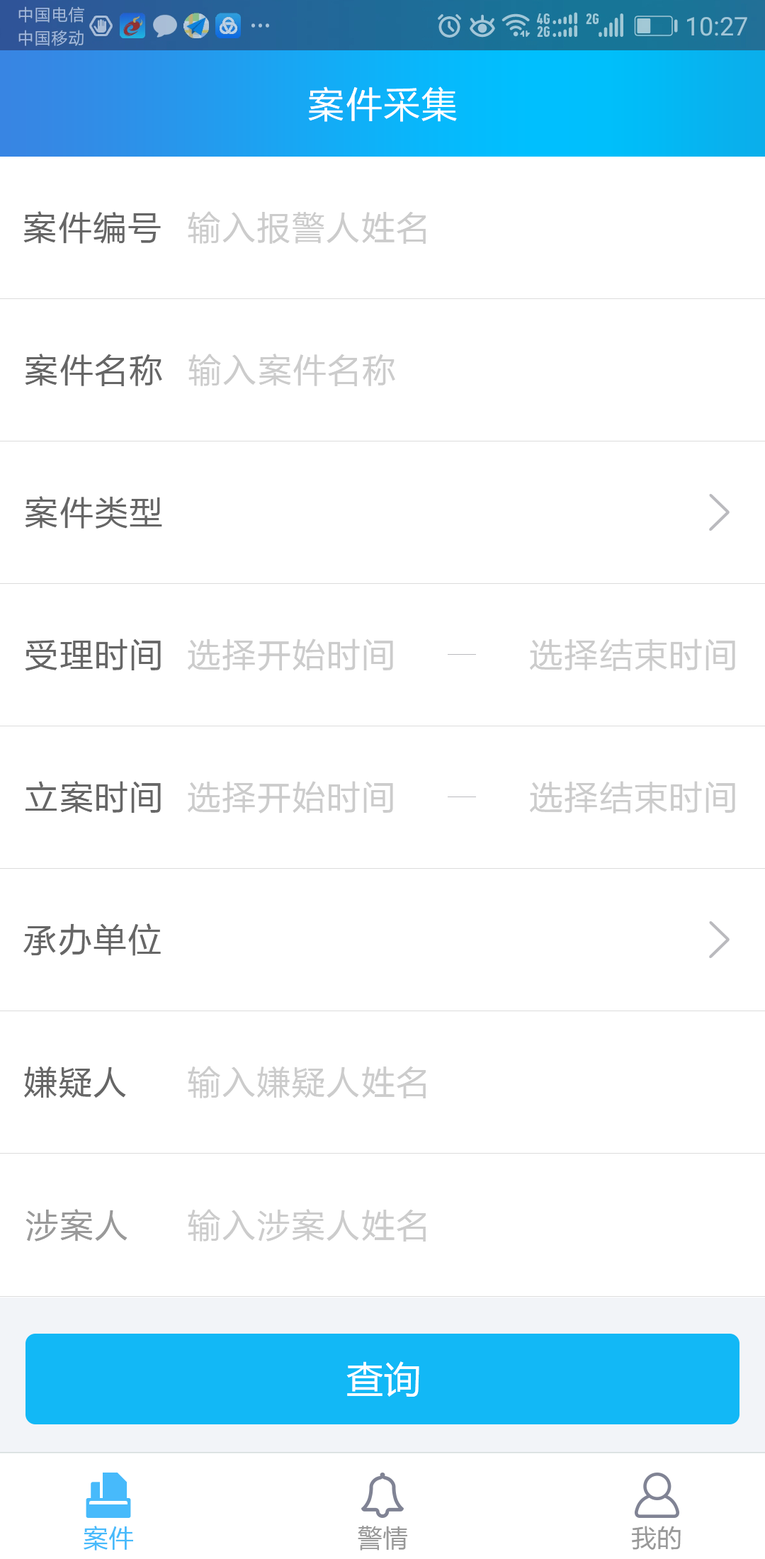
<style>
.page{position:relative;width:765px;height:1559px;background:#ffffff}
.page>*{position:absolute;margin:0}
.t1{font:36.8px "FZLTHK--GBK1-0";letter-spacing:0.025em;color:#ffffff}
.t2{font:34px "FZLTHK--GBK1-0";letter-spacing:0.025em;color:#666666}
.t3{font:34px "FZLTHK--GBK1-0";letter-spacing:0.025em;color:#cccccc}
.t4{font:34px "FZLTHK--GBK1-0";letter-spacing:0.025em;color:#999999}
.t5{font:36.8px "MicrosoftYaHei";letter-spacing:0.025em;color:#ffffff}
.t6{font:25.5px "FZLTHK--GBK1-0";letter-spacing:0.025em;color:#47bafb}
.t7{font:25.5px "FZLTHK--GBK1-0";letter-spacing:0.025em;color:#999999}
</style>
<div class="page">
<p class="t1" style="left:308px;top:86px;width:149px;height:36px">案件采集</p>
<p class="t2" style="left:23px;top:211px;width:138px;height:33px">案件编号</p>
<p class="t3" style="left:188px;top:211px;width:238px;height:33px">输入报警人姓名</p>
<p class="t2" style="left:25px;top:354px;width:137px;height:32px">案件名称</p>
<p class="t3" style="left:188px;top:354px;width:207px;height:32px">输入案件名称</p>
<p class="t2" style="left:25px;top:496px;width:137px;height:32px">案件类型</p>
<p class="t2" style="left:25px;top:638px;width:136px;height:33px">受理时间</p>
<p class="t3" style="left:188px;top:638px;width:205px;height:33px">选择开始时间</p>
<p class="t3" style="left:530px;top:638px;width:205px;height:33px">选择结束时间</p>
<p class="t2" style="left:26px;top:781px;width:135px;height:32px">立案时间</p>
<p class="t3" style="left:188px;top:781px;width:205px;height:32px">选择开始时间</p>
<p class="t3" style="left:530px;top:781px;width:205px;height:32px">选择结束时间</p>
<p class="t2" style="left:23px;top:923px;width:138px;height:33px">承办单位</p>
<p class="t2" style="left:24px;top:1065px;width:102px;height:33px">嫌疑人</p>
<p class="t3" style="left:188px;top:1065px;width:238px;height:33px">输入嫌疑人姓名</p>
<p class="t4" style="left:26px;top:1209px;width:102px;height:32px">涉案人</p>
<p class="t3" style="left:188px;top:1209px;width:238px;height:32px">输入涉案人姓名</p>
<p class="t5" style="left:346px;top:1361px;width:73px;height:35px">查询</p>
<p class="t6" style="left:84px;top:1525px;width:49px;height:25px">案件</p>
<p class="t7" style="left:358px;top:1525px;width:49px;height:25px">警情</p>
<p class="t7" style="left:632px;top:1525px;width:49px;height:24px">我的</p>
</div>
